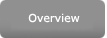
<style>
.page{position:relative;width:107px;height:38px;background:#909090}
.page>*{position:absolute;margin:0}
.t1{font:11px "Verdana";color:#ffffff}
</style>
<div class="page">
<p class="t1" style="left:28px;top:13px;width:52px;height:10px">Overview</p>
</div>
